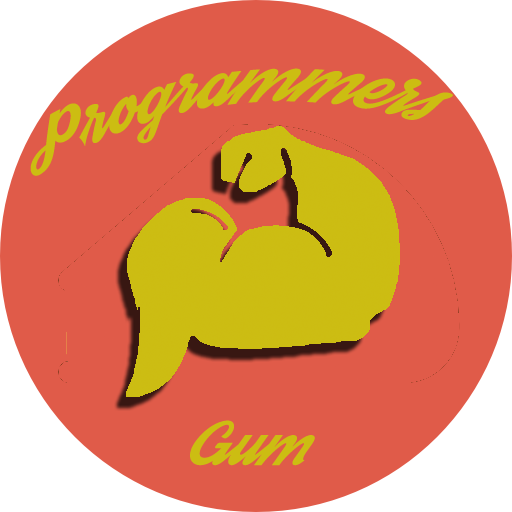
<style>
.page{position:relative;width:512px;height:512px;background:#e05b49}
.page>*{position:absolute;margin:0}
.t1{font:45px "Streetwear";color:#ccbd12;font-style:italic}
</style>
<div class="page">
<p class="t1" style="left:30px;top:68px;width:423px;height:108px">Programmers</p>
<p class="t1" style="left:190px;top:420px;width:125px;height:46px">Gum</p>
</div>
